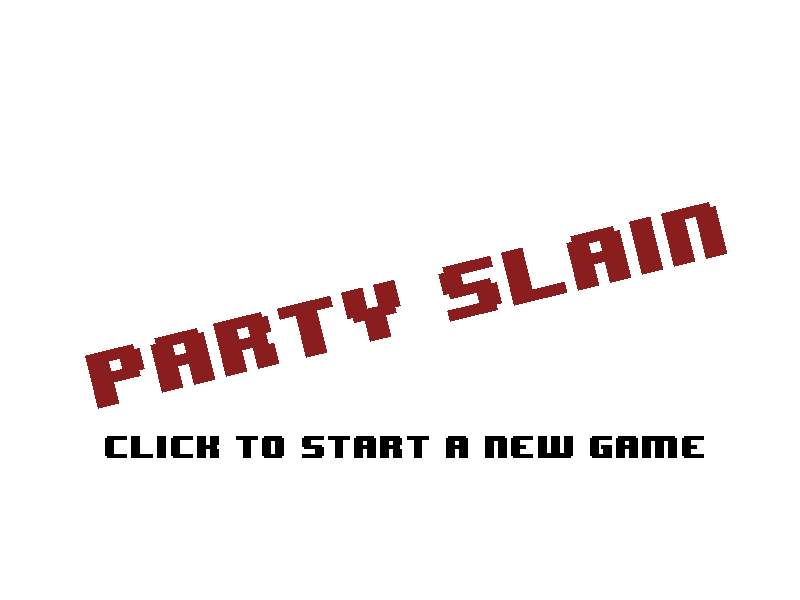
<style>
.page{position:relative;width:800px;height:600px;background:#ffffff}
.page>*{position:absolute;margin:0}
.t1{font:65.5px "8BITWONDERNominal";color:#8a1d1d}
.t2{font:26.2px "8BITWONDERNominal";color:#010000}
</style>
<div class="page">
<p class="t1" style="left:85px;top:202px;width:642px;height:207px;rotate:-14deg">PARTY SLAIN</p>
<p class="t2" style="left:105px;top:436px;width:599px;height:22px">click to start a new game</p>
</div>
